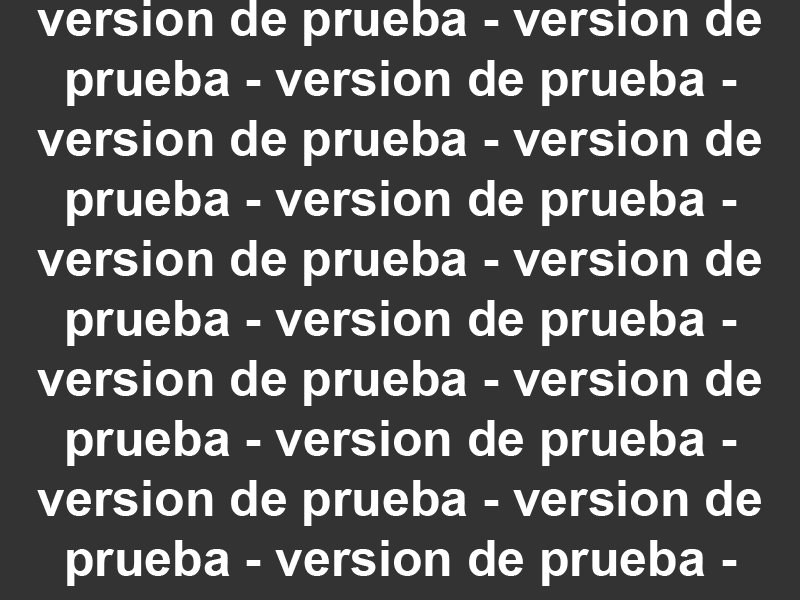
<style>
.page{position:relative;width:800px;height:600px;background:#333333}
.page>*{position:absolute;margin:0}
.t1{font:50px "Arial-BoldMT";color:#ffffff}
</style>
<div class="page">
<p class="t1" style="left:37px;top:0px;width:724px;height:586px;text-align:center">version de prueba - version de prueba - version de prueba - version de prueba - version de prueba - version de prueba - version de prueba - version de prueba - version de prueba - version de prueba - version de prueba - version de prueba - version de prueba - version de prueba - version de prueba -</p>
</div>
